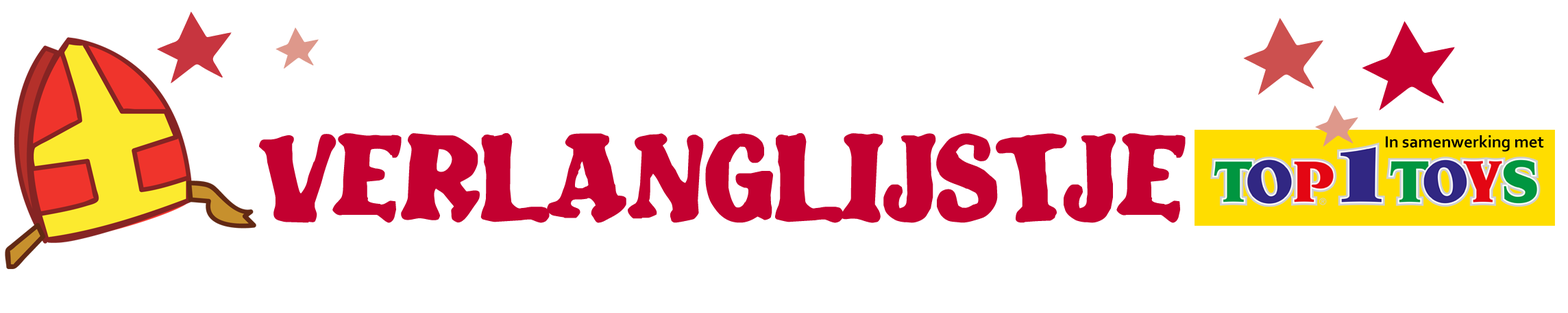
<style>
.page{position:relative;width:1568px;height:313px;background:#ffffff}
.page>*{position:absolute;margin:0}
.t1{font:89.1px "Blatant";color:#c30030}
.t2{font:17.1px "Corbel-Bold";color:#000000}
</style>
<div class="page">
<p class="t1" style="left:259px;top:132px;width:927px;height:91px">Verlanglijstje</p>
<p class="t2" style="left:1386px;top:135px;width:158px;height:16px">In samenwerking met</p>
</div>
